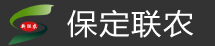
<style>
.page{position:relative;width:215px;height:46px;background:#333333}
.page>*{position:absolute;margin:0}
.t1{font:28.8px "MicrosoftYaHei";letter-spacing:0.06em;color:#ffffff;text-transform:uppercase;scale:1.06 1}
</style>
<div class="page">
<p class="t1" style="left:67px;top:9px;width:127px;height:29px">保定联农</p>
</div>
